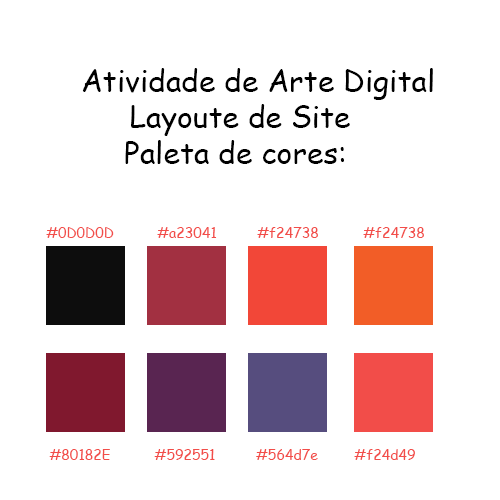
<style>
.page{position:relative;width:500px;height:500px;background:#ffffff}
.page>*{position:absolute;margin:0}
.t1{font:30px "ComicSansMS";color:#000000}
.t2{font:14px "ComicSansMS";color:#f24d49}
</style>
<div class="page">
<p class="t1" style="left:82px;top:68px;width:351px;height:96px;text-align:center">Atividade de Arte Digital<br>Layoute de Site<br>Paleta de cores:</p>
<p class="t2" style="left:46px;top:227px;width:68px;height:11px">#0D0D0D</p>
<p class="t2" style="left:157px;top:227px;width:60px;height:11px">#a23041</p>
<p class="t2" style="left:257px;top:227px;width:61px;height:11px">#f24738</p>
<p class="t2" style="left:363px;top:227px;width:61px;height:11px">#f24738</p>
<p class="t2" style="left:49px;top:449px;width:61px;height:11px">#80182E</p>
<p class="t2" style="left:154px;top:449px;width:61px;height:11px">#592551</p>
<p class="t2" style="left:256px;top:449px;width:62px;height:11px">#564d7e</p>
<p class="t2" style="left:354px;top:449px;width:61px;height:11px">#f24d49</p>
</div>
